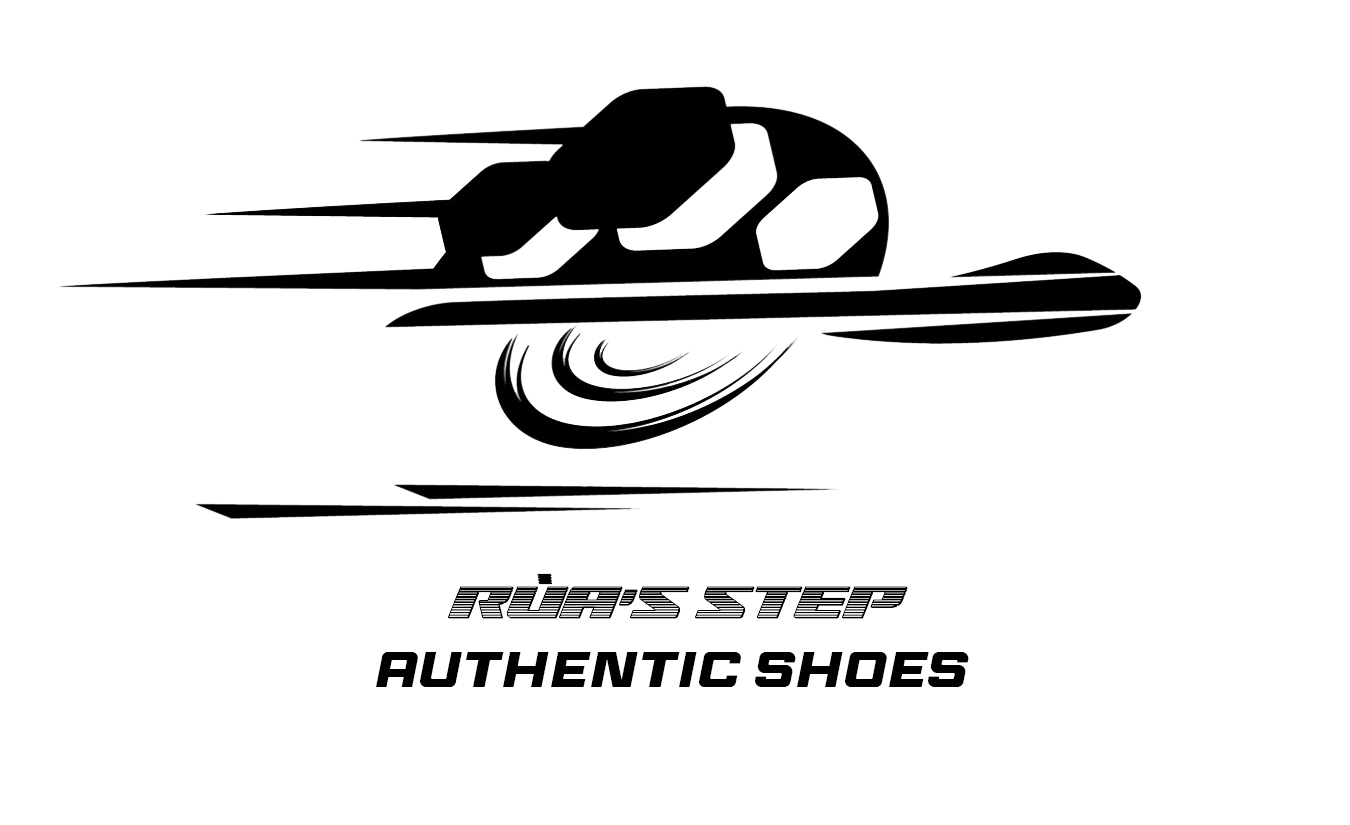
<style>
.page{position:relative;width:1350px;height:825px;background:#ffffff}
.page>*{position:absolute;margin:0}
.t1{font:50px "SuperBrigadeChrome";color:#000101}
.t2{font:50px "RaceSportRegular";color:#000101}
</style>
<div class="page">
<p class="t1" style="left:448px;top:573px;width:460px;height:46px">RÙA’S STEP</p>
<p class="t2" style="left:376px;top:652px;width:593px;height:35px">authentic shoes</p>
</div>
